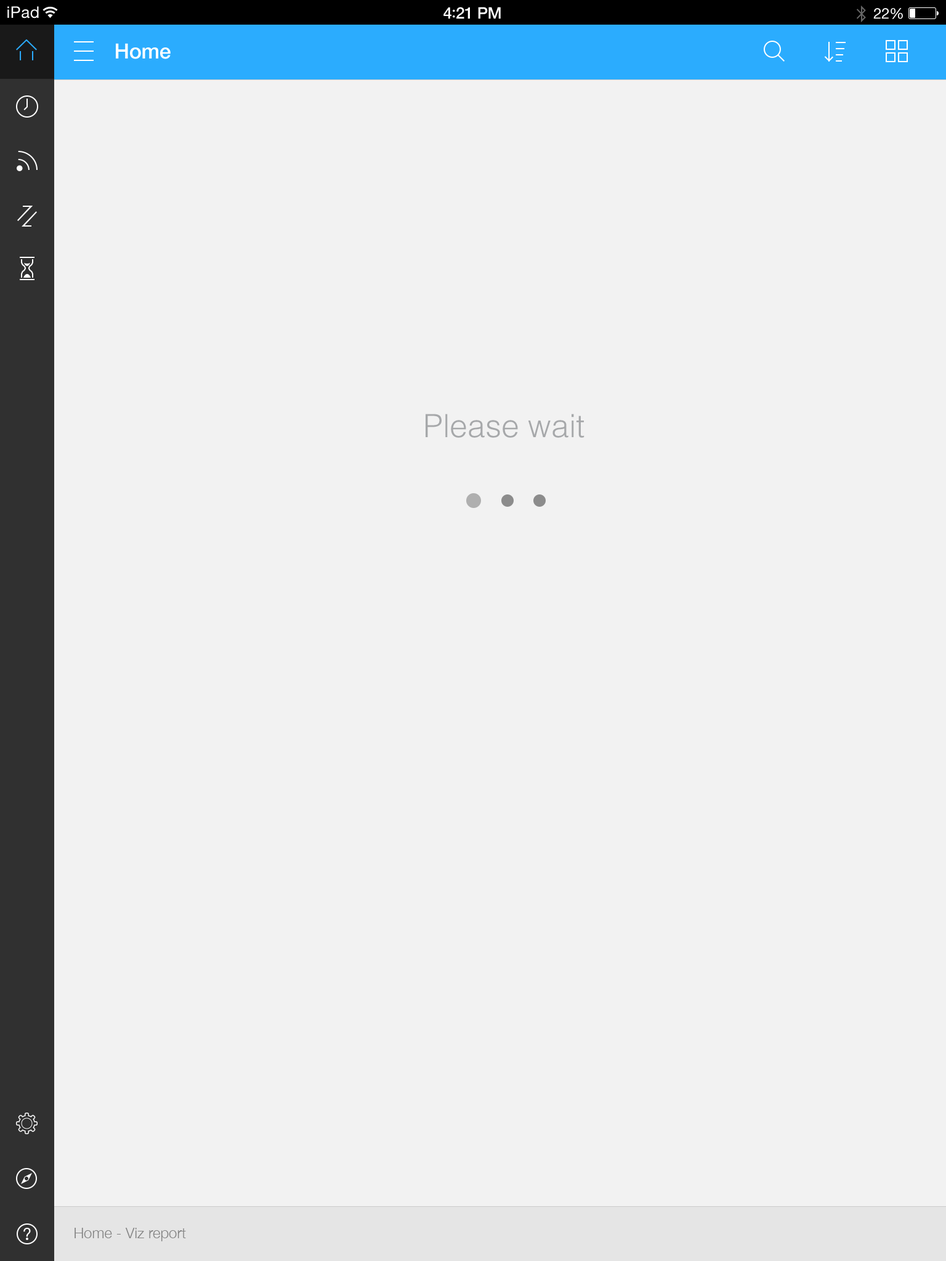
<style>
.page{position:relative;width:946px;height:1261px;background:#f2f2f2}
.page>*{position:absolute;margin:0}
.t1{font:16px "HelveticaNeue";letter-spacing:0.02em;color:#ffffff}
.t2{font:16px "HelveticaNeue-Medium";letter-spacing:-0.02em;color:#ffffff}
.t3{font:16px "Avenir-Medium";letter-spacing:-0.02em;color:#ffffff}
.t4{font:14.8px "HelveticaNeue";letter-spacing:-0.02em;color:#ffffff}
.t5{font:20.9px "HelveticaNeue-Medium";letter-spacing:-0.01em;color:#ffffff}
.t6{font:32px "Helvetica-Light";color:#a6a8aa}
.t7{font:14.8px "HelveticaNeue-Light";color:#828282}
</style>
<div class="page">
<p class="t1" style="left:7px;top:6px;width:32px;height:12px">iPad</p>
<p class="t2" style="left:443px;top:7px;width:58px;height:12px">4<span class="t3">:</span>21 PM</p>
<p class="t4" style="left:873px;top:8px;width:30px;height:11px">22%</p>
<p class="t5" style="left:116px;top:43px;width:55px;height:16px">Home</p>
<p class="t6" style="left:425px;top:414px;width:159px;height:24px">Please wait</p>
<p class="t7" style="left:74px;top:1228px;width:112px;height:13px">Home - Viz report</p>
</div>
